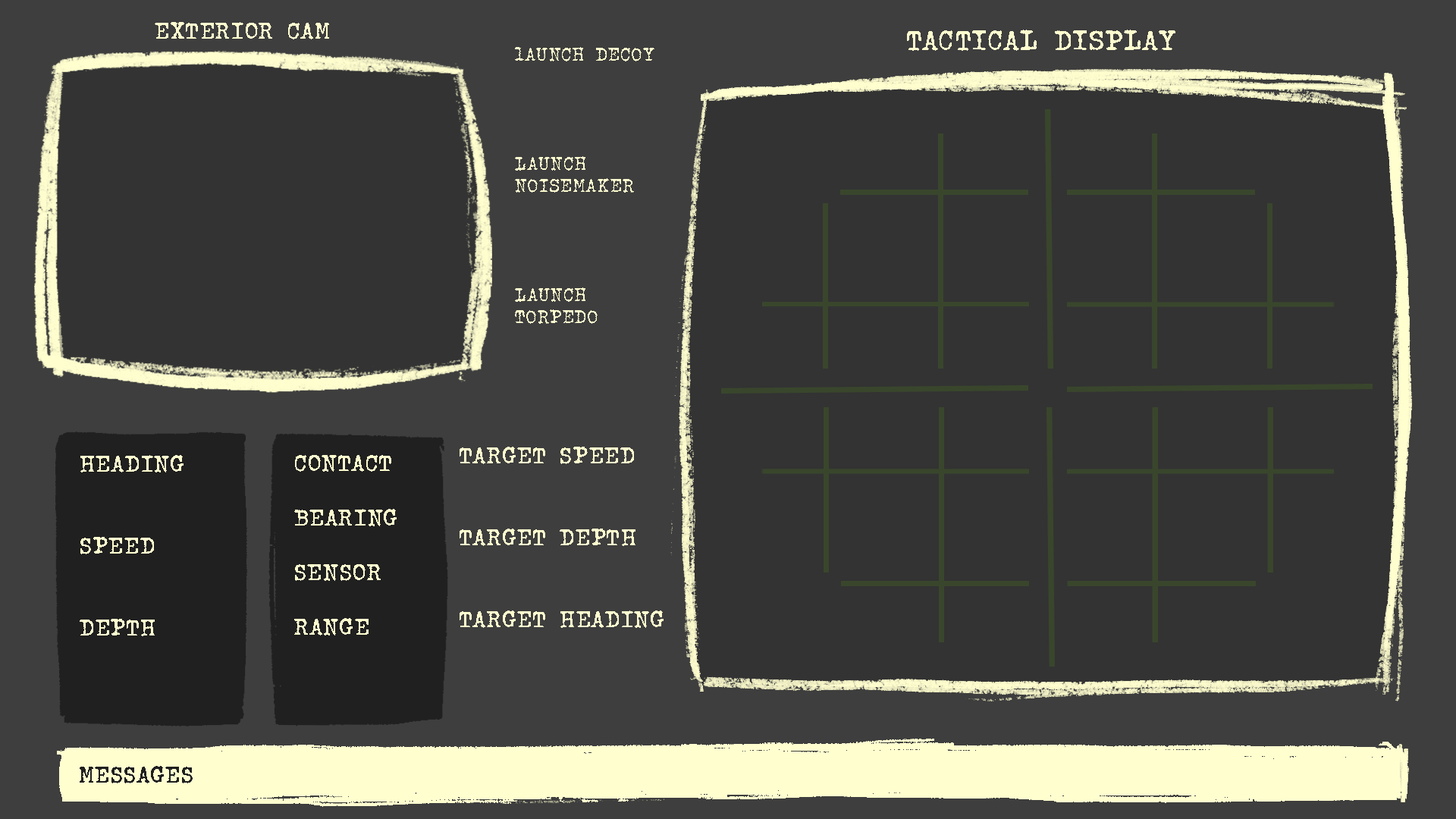
<style>
.page{position:relative;width:1456px;height:819px;background:#333333}
.page>*{position:absolute;margin:0}
.t1{font:22.7px "JohnDoe-Bold";color:#fffecf}
.t2{font:27.3px "JohnDoe-Bold";color:#fdfcce}
.t3{font:18.2px "JohnDoe-Bold";color:#fdfcce}
.t4{font:22.7px "JohnDoe-Bold";color:#fdfcce}
.t5{font:22.7px "JohnDoe-Bold";color:#202020}
</style>
<div class="page">
<p class="t1" style="left:155px;top:22px;width:174px;height:17px">EXTERIOR CAM</p>
<p class="t2" style="left:907px;top:30px;width:268px;height:21px">TACTICAL DISPLAY</p>
<p class="t3" style="left:515px;top:47px;width:139px;height:277px">lAUNCH DECOY<br><br><br><br><br>LAUNCH<br>NOISEMAKER<br><br><br><br><br>LAUNCH<br>TORPEDO</p>
<p class="t4" style="left:460px;top:447px;width:204px;height:181px">TARGET SPEED<br><br><br>TARGET DEPTH<br><br><br>TARGET HEADING</p>
<p class="t1" style="left:80px;top:455px;width:104px;height:181px">HEADING<br><br><br>SPEED<br><br><br>DEPTH</p>
<p class="t4" style="left:294px;top:455px;width:103px;height:180px">CONTACT<br><br>BEARING<br><br>SENSOR<br><br>RANGE</p>
<p class="t5" style="left:80px;top:766px;width:113px;height:17px">MESSAGES</p>
</div>
